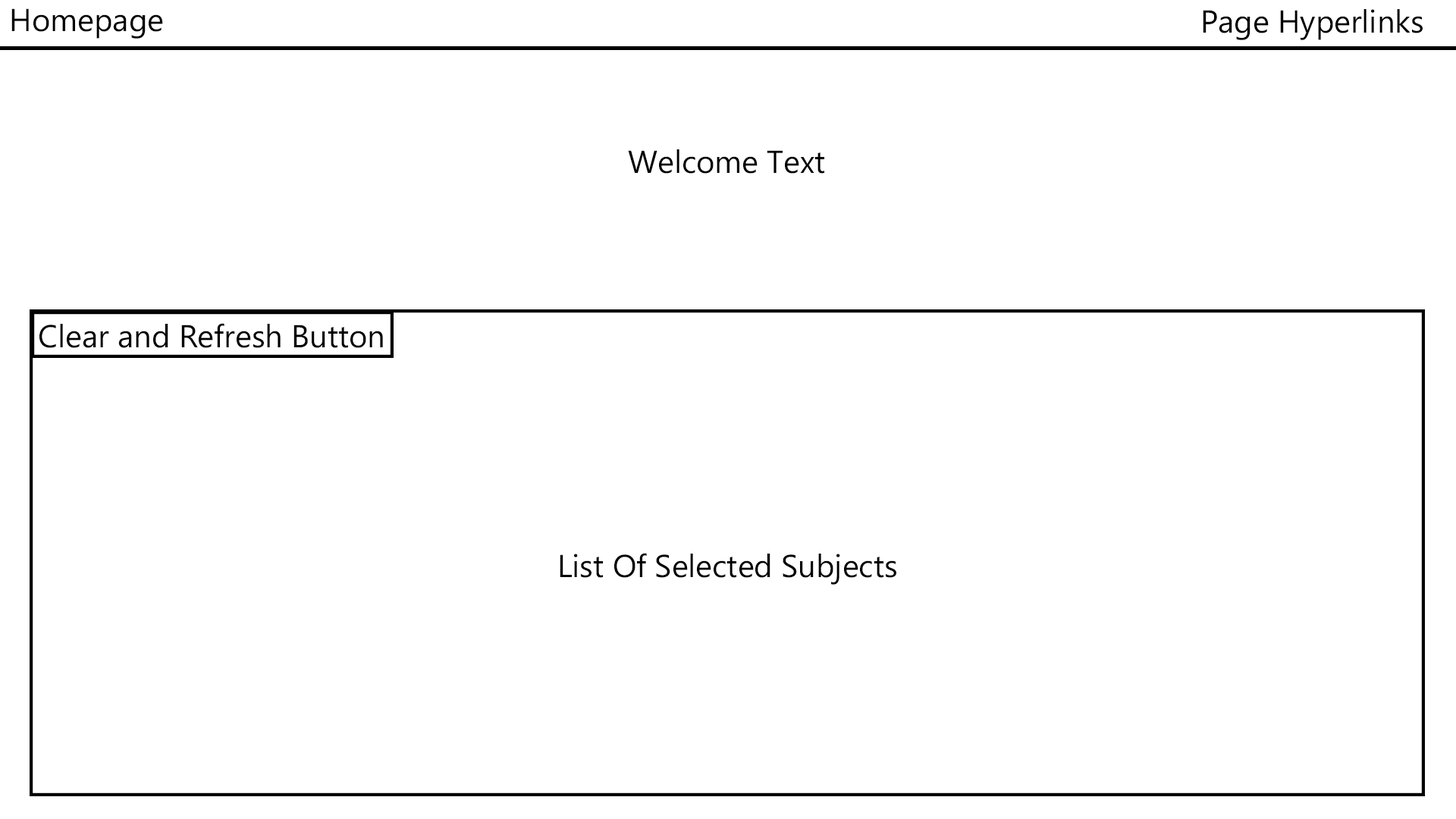
<style>
.page{position:relative;width:1456px;height:819px;background:#ffffff}
.page>*{position:absolute;margin:0}
.t1{font:31.6px "MicrosoftPhagsPa";color:#000000}
</style>
<div class="page">
<p class="t1" style="left:11px;top:8px;width:152px;height:31px">Homepage</p>
<p class="t1" style="left:1203px;top:9px;width:220px;height:31px">Page Hyperlinks</p>
<p class="t1" style="left:628px;top:149px;width:196px;height:25px">Welcome Text</p>
<p class="t1" style="left:39px;top:323px;width:344px;height:25px">Clear and Refresh Button</p>
<p class="t1" style="left:560px;top:553px;width:336px;height:32px">List Of Selected Subjects</p>
</div>
